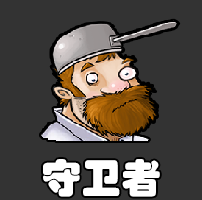
<style>
.page{position:relative;width:202px;height:200px;background:#333333}
.page>*{position:absolute;margin:0}
.t1{font:39.9px "STHupo";color:#ffffff}
</style>
<div class="page">
<p class="t1" style="left:43px;top:159px;width:117px;height:38px">守卫者</p>
</div>
